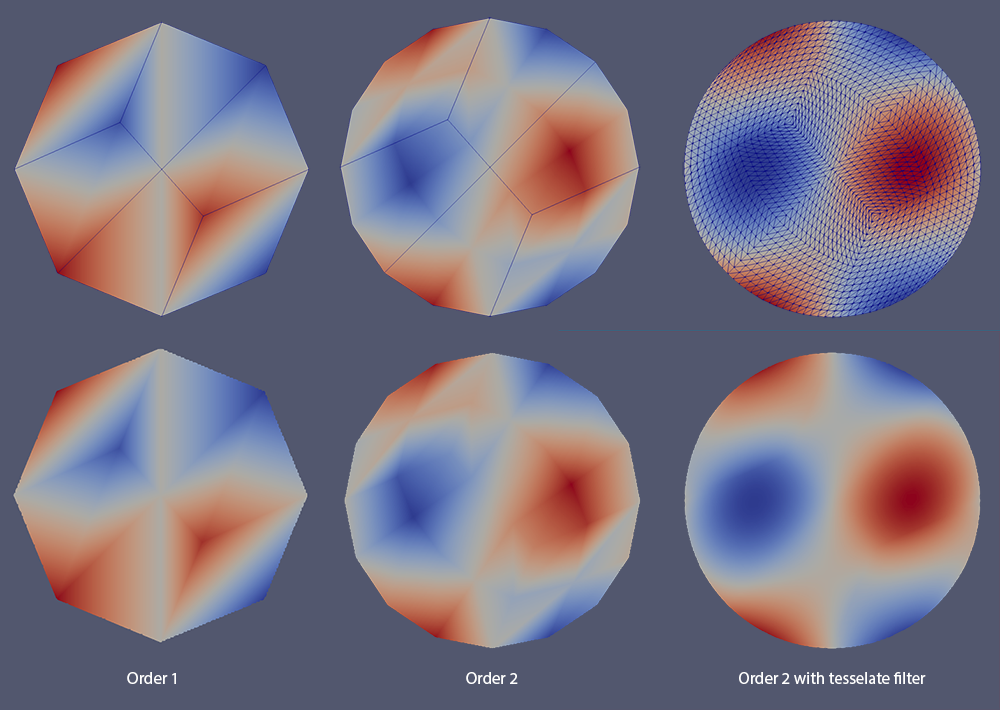
<style>
.page{position:relative;width:1000px;height:710px;background:#52576e}
.page>*{position:absolute;margin:0}
.t1{font:16.8px "MyriadPro-Regular";color:#ffffff}
</style>
<div class="page">
<p class="t1" style="left:127px;top:672px;width:49px;height:12px">Order 1</p>
<p class="t1" style="left:466px;top:672px;width:52px;height:12px">Order 2</p>
<p class="t1" style="left:739px;top:672px;width:187px;height:12px">Order 2 with tesselate filter</p>
</div>
